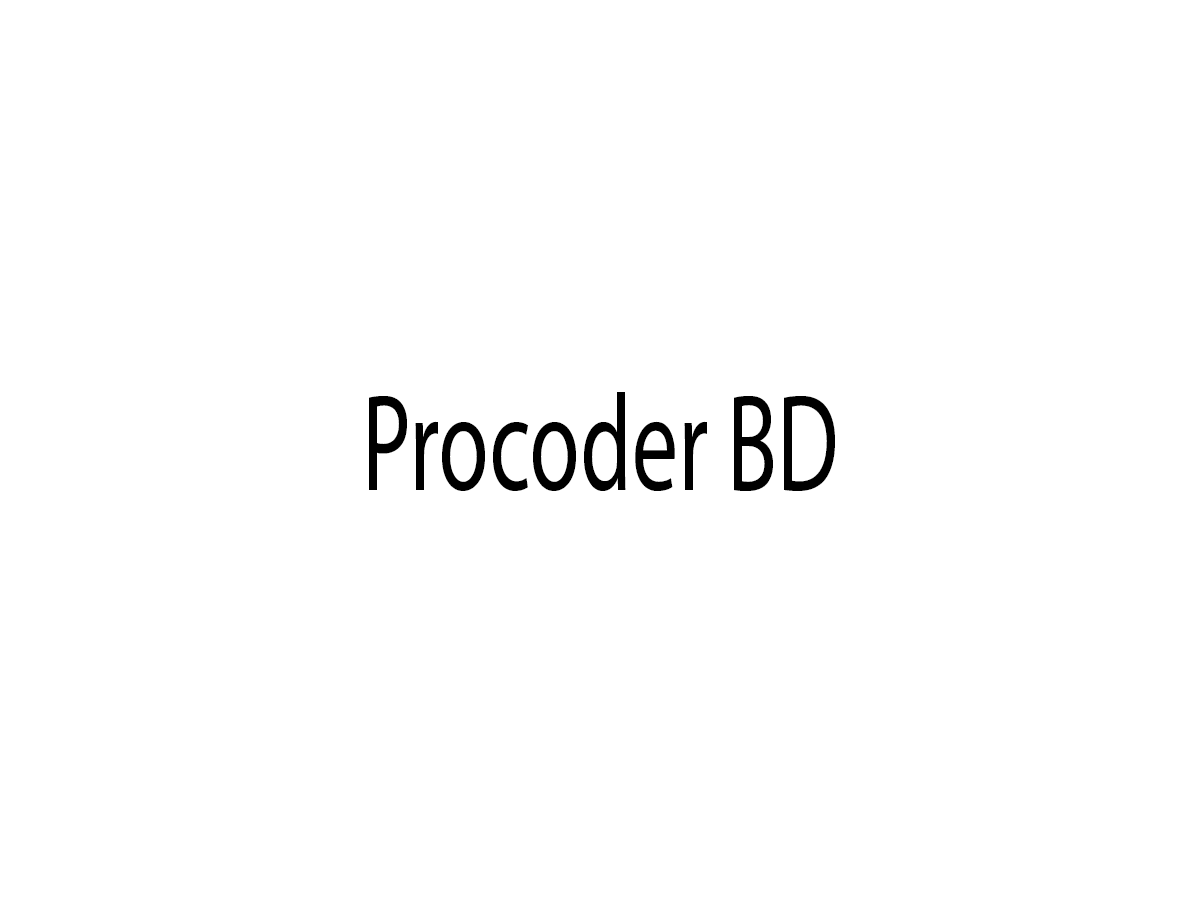
<style>
.page{position:relative;width:1200px;height:900px;background:#ffffff}
.page>*{position:absolute;margin:0}
.t1{font:137.4px "MyriadPro-Regular";color:#000000;scale:0.67 1}
</style>
<div class="page">
<p class="t1" style="left:369px;top:392px;width:466px;height:99px">Procoder BD</p>
</div>
